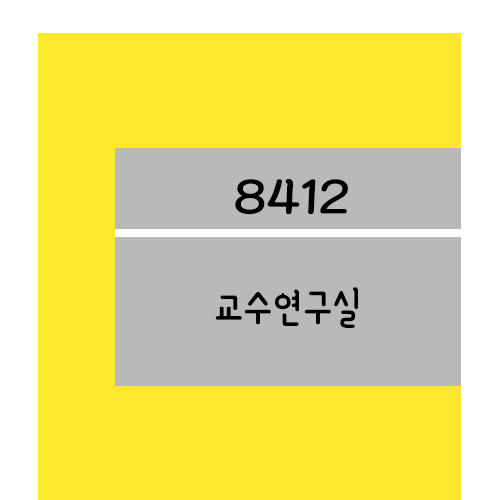
<style>
.page{position:relative;width:500px;height:500px;background:#fee82d}
.page>*{position:absolute;margin:0}
.t1{font:61.2px "YanoljaYacheR";color:#000000;scale:1.18 1}
.t2{font:48px "YanoljaYacheR";color:#000000}
</style>
<div class="page">
<p class="t1" style="left:235px;top:179px;width:113px;height:36px">8412</p>
<p class="t2" style="left:215px;top:287px;width:143px;height:41px">교수연구실</p>
</div>
